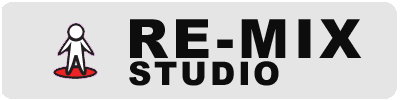
<style>
.page{position:relative;width:400px;height:100px;background:#e5e5e5}
.page>*{position:absolute;margin:0}
.t1{font:54px "Arial-Black";letter-spacing:0.1em;color:#0e0d0d}
.t2{font:32.4px "Arial-Black";letter-spacing:0.1em;color:#0e0d0d}
</style>
<div class="page">
<p class="t1" style="left:130px;top:19px;width:232px;height:39px">RE-MIX</p>
<p class="t2" style="left:129px;top:61px;width:150px;height:25px">STUDIO</p>
</div>
